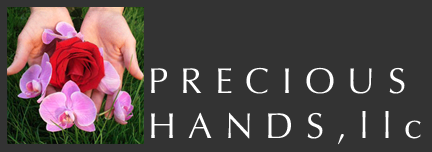
<style>
.page{position:relative;width:432px;height:152px;background:#333333}
.page>*{position:absolute;margin:0}
.t1{font:36px/30px "Optima-Regular";letter-spacing:0.35em;color:#ffffff}
</style>
<div class="page">
<p class="t1" style="left:151px;top:67px;width:270px;height:78px">PRECIOUS<br>HANDS,llc</p>
</div>
